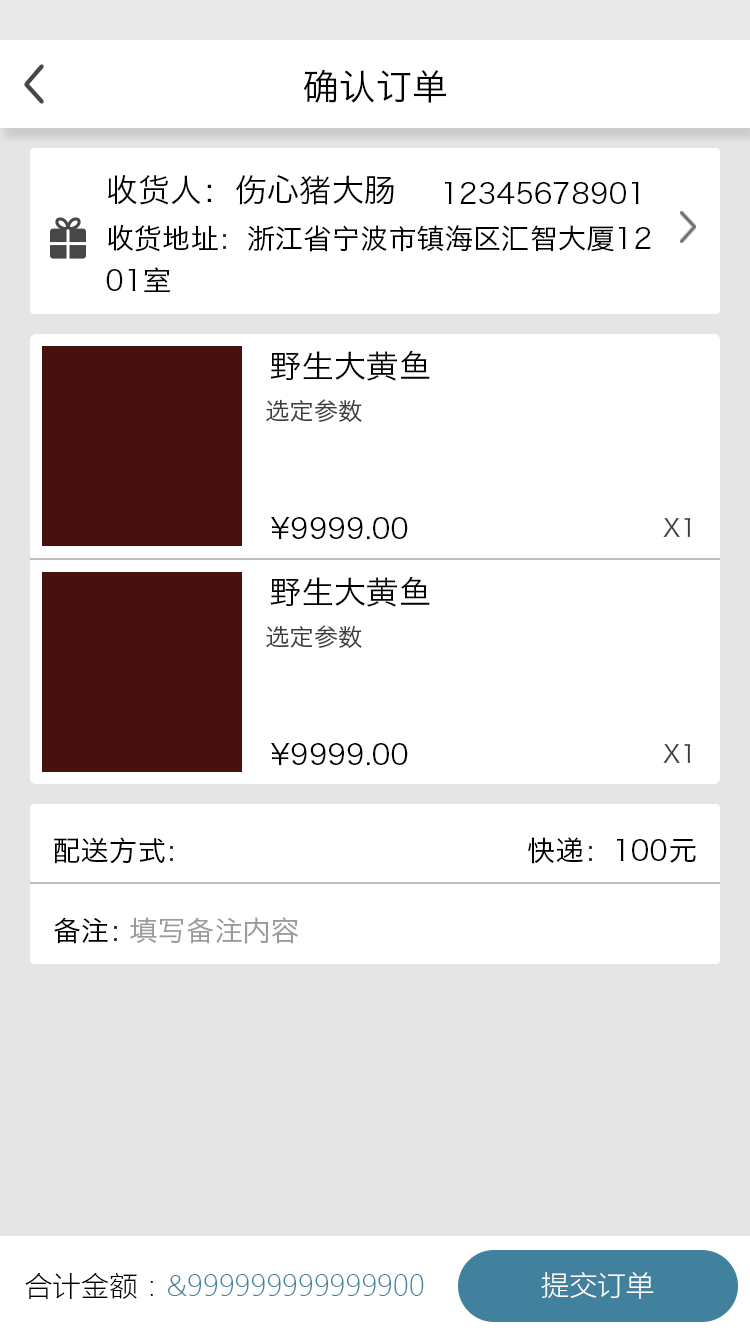
<style>
.page{position:relative;width:750px;height:1334px;background:#ffffff}
.page>*{position:absolute;margin:0}
.t1{font:36px "HiraginoSansGB-W3";color:#000000}
.t2{font:32px "HiraginoSansGB-W3";color:#000000}
.t3{font:28px "HiraginoSansGB-W3";color:#000000}
.t4{font:28px/42px "HiraginoSansGB-W3";color:#000000}
.t5{font:24px "HiraginoSansGB-W3";color:#3d3d3d}
.t6{font:28px "HiraginoSansGB-W3";color:#9a9a9a}
.t7{font:28px "MicrosoftYaHeiLight";color:#42819d}
.t8{font:28px "MicrosoftYaHeiLight";color:#000000}
.t9{font:28px "MicrosoftYaHeiLight";color:#ffffff}
</style>
<div class="page">
<p class="t1" style="left:303px;top:69px;width:144px;height:34px">确认订单</p>
<p class="t2" style="left:108px;top:175px;width:286px;height:30px">收货人：伤心猪大肠</p>
<p class="t3" style="left:445px;top:181px;width:194px;height:24px">12345678901</p>
<p class="t4" style="left:106px;top:224px;width:545px;height:69px">收货地址：浙江省宁波市镇海区汇智大厦12<br>01室</p>
<p class="t2" style="left:270px;top:350px;width:160px;height:31px">野生大黄鱼</p>
<p class="t5" style="left:266px;top:399px;width:96px;height:23px">选定参数</p>
<p class="t3" style="left:270px;top:517px;width:138px;height:22px">¥9999.00</p>
<p class="t5" style="left:663px;top:518px;width:28px;height:19px">X1</p>
<p class="t2" style="left:270px;top:576px;width:160px;height:31px">野生大黄鱼</p>
<p class="t5" style="left:266px;top:625px;width:96px;height:23px">选定参数</p>
<p class="t3" style="left:270px;top:743px;width:138px;height:22px">¥9999.00</p>
<p class="t5" style="left:663px;top:744px;width:28px;height:19px">X1</p>
<p class="t3" style="left:54px;top:837px;width:119px;height:27px">配送方式：</p>
<p class="t3" style="left:528px;top:837px;width:168px;height:27px">快递：100元</p>
<p class="t3" style="left:54px;top:917px;width:63px;height:27px">备注：</p>
<p class="t6" style="left:130px;top:917px;width:168px;height:27px">填写备注内容</p>
<p class="t7" style="left:25px;top:1273px;width:399px;height:26px"><span class="t8">合计金额：</span>&amp;999999999999900</p>
<p class="t9" style="left:541px;top:1272px;width:113px;height:27px">提交订单</p>
</div>
